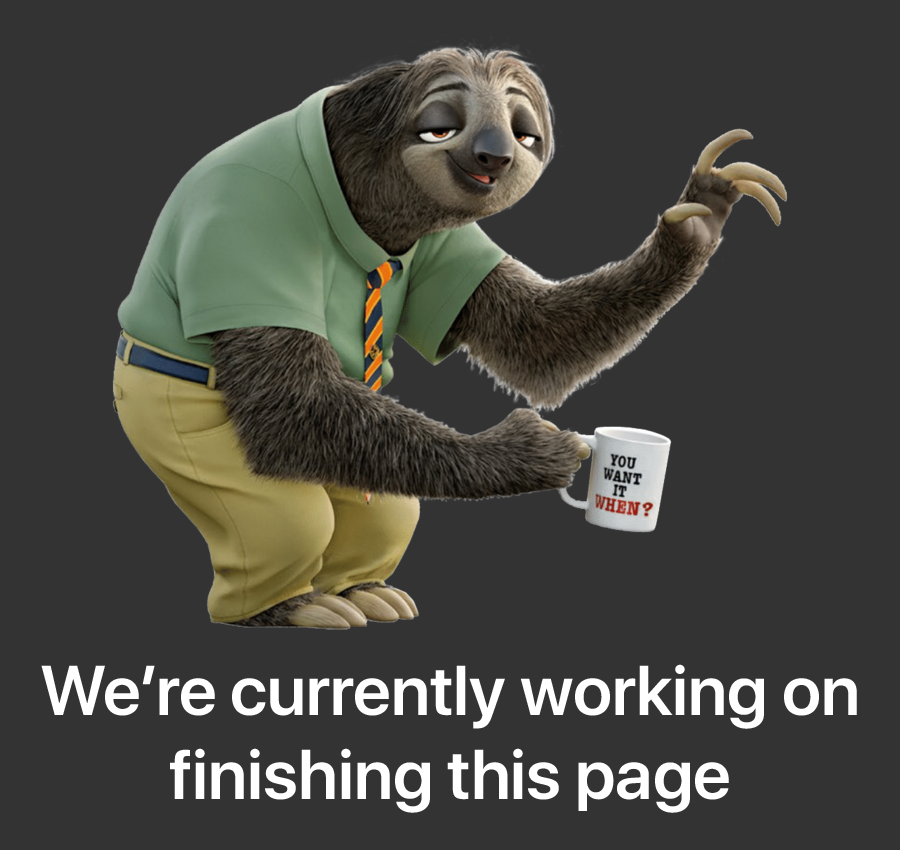
<style>
.page{position:relative;width:900px;height:850px;background:#333333}
.page>*{position:absolute;margin:0}
.t1{font:70px "SFDisplay-Semibold";color:#ffffff}
</style>
<div class="page">
<p class="t1" style="left:41px;top:664px;width:816px;height:149px;text-align:center">We’re currently working on<br>finishing this page</p>
</div>
